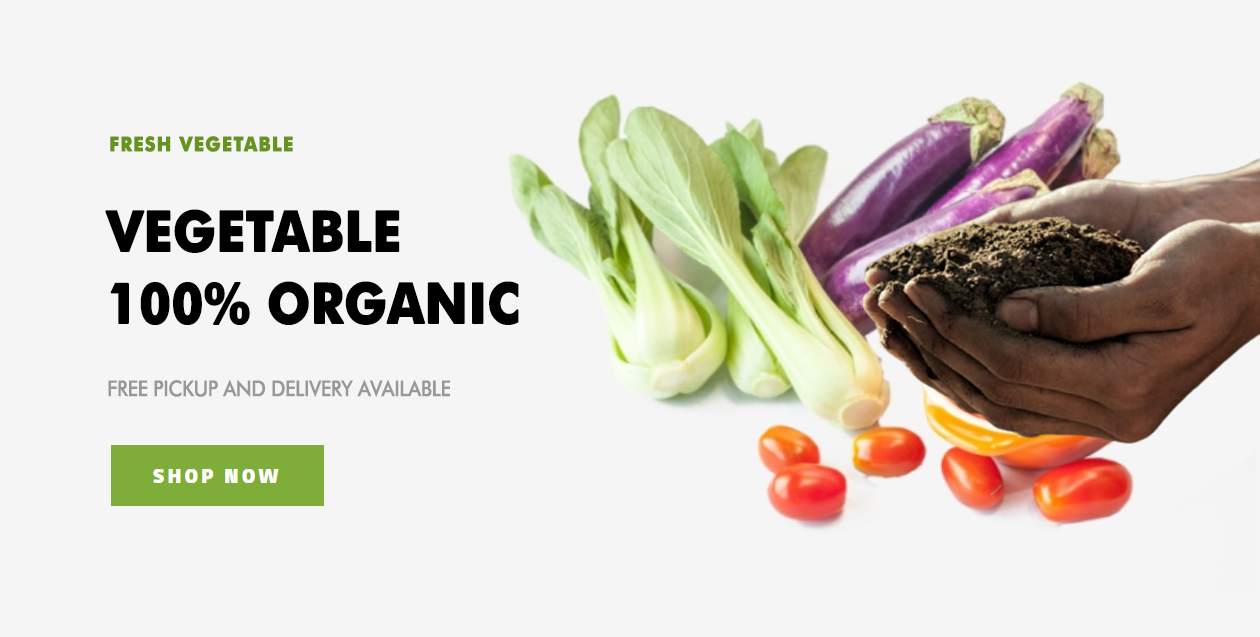
<style>
.page{position:relative;width:1260px;height:637px;background:#f5f5f5}
.page>*{position:absolute;margin:0}
.t1{font:20px "FuturaBT-Bold";letter-spacing:0.05em;color:#66941f;text-transform:uppercase;font-weight:bold;scale:0.9 1}
.t2{font:56px/72px "FuturaBT-Bold";letter-spacing:-0.01em;color:#000000;text-transform:uppercase;font-weight:bold;scale:0.9 1}
.t3{font:22px "FuturaBT-Medium";letter-spacing:-0.025em;color:#989997;text-transform:uppercase;scale:0.9 1}
</style>
<div class="page">
<p class="t1" style="left:110px;top:136px;width:183px;height:16px">FRESh vegetable</p>
<p class="t2" style="left:105px;top:209px;width:414px;height:116px">vegetable<br>100% Organic</p>
<p class="t3" style="left:108px;top:379px;width:342px;height:18px">Free pickup and delivery available</p>
</div>
